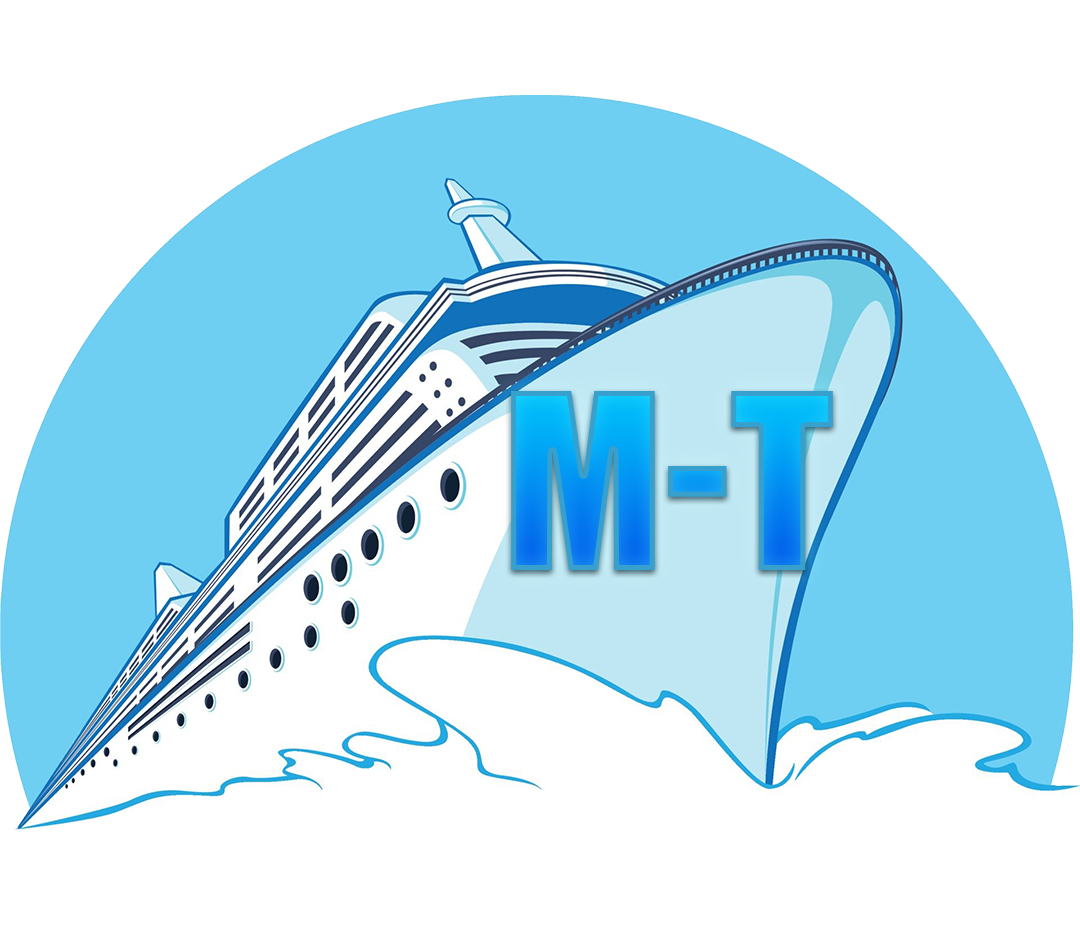
<style>
.page{position:relative;width:1080px;height:925px;background:#ffffff}
.page>*{position:absolute;margin:0}
.t1{font:226px "Impact";text-transform:uppercase}
</style>
<div class="page">
<p class="t1" style="left:511px;top:391px;width:322px;height:179px">M-T</p>
</div>
